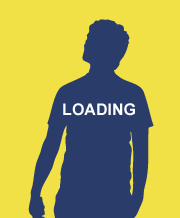
<style>
.page{position:relative;width:180px;height:218px;background:#f1e146}
.page>*{position:absolute;margin:0}
.t1{font:16px "Arial-BoldMT";color:#ffffff}
</style>
<div class="page">
<p class="t1" style="left:63px;top:103px;width:72px;height:13px">LOADING</p>
</div>
